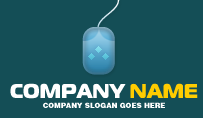
<style>
.page{position:relative;width:203px;height:118px;background:#144e56}
.page>*{position:absolute;margin:0}
.t1{font:20px "MagistralBlackC";color:#ffffff;text-transform:uppercase}
.t2{font:20px "MagistralBlackC";color:#ffcc00;text-transform:uppercase}
.t3{font:7px "HeliosBlack";color:#ffffff;text-transform:uppercase}
</style>
<div class="page">
<p class="t1" style="left:10px;top:83px;width:188px;height:16px">Company <span class="t2">Name</span></p>
<p class="t3" style="left:43px;top:102px;width:122px;height:6px">company slogan goes here</p>
</div>
